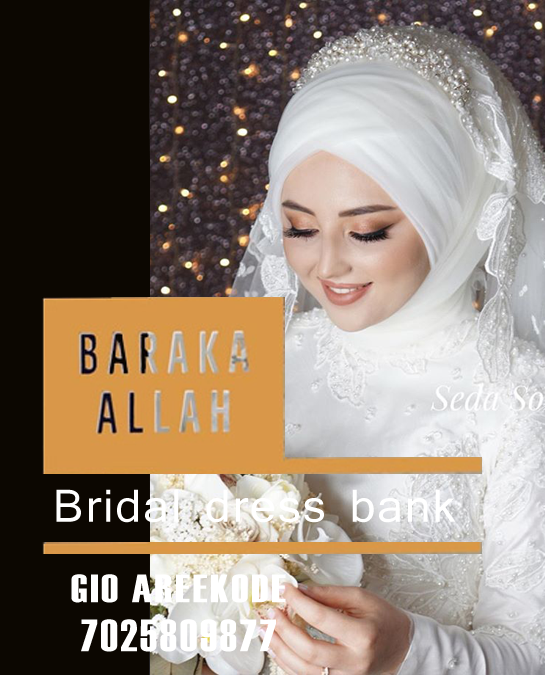
<style>
.page{position:relative;width:545px;height:675px;background:#0c0701}
.page>*{position:absolute;margin:0}
.t1{font:48.6px "Shruti";letter-spacing:0.04em;color:#ffffff}
.t2{font:39.6px/72px "Haettenschweiler";letter-spacing:0.06em;color:#ffffff;scale:1.14 1}
.t3{font:45.4px/72px "Haettenschweiler";letter-spacing:0.06em;color:#ffffff}
</style>
<div class="page">
<p class="t1" style="left:56px;top:489px;width:400px;height:34px">Bridal dress bank</p>
<p class="t2" style="left:71px;top:574px;width:215px;height:78px;text-align:center">GIO AREEKODE<br><span class="t3">7025809877</span></p>
</div>
